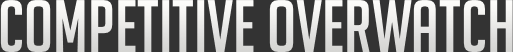
<style>
.page{position:relative;width:513px;height:52px;background:#333333}
.page>*{position:absolute;margin:0}
.t1{font:124px "BigNoodleTitling";letter-spacing:0.001em;color:#e9e9e7}
</style>
<div class="page">
<p class="t1" style="left:0px;top:0px;width:513px;height:52px">COMPETITIVE OVERWATCH</p>
</div>
